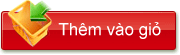
<style>
.page{position:relative;width:180px;height:55px;background:#ffffff}
.page>*{position:absolute;margin:0}
.t1{font:17px "ArialMT";color:#ffffff}
</style>
<div class="page">
<p class="t1" style="left:58px;top:22px;width:103px;height:17px">Thêm vào giỏ</p>
</div>
